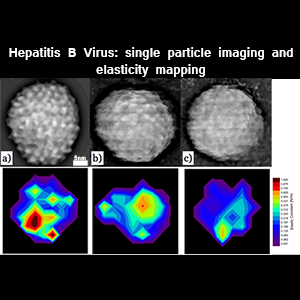
<style>
.page{position:relative;width:300px;height:300px;background:#000000}
.page>*{position:absolute;margin:0}
.t1{font:14px "Latha-Bold";color:#ffffff}
.t2{font:6.5px "Latha-Bold";color:#ffffff}
</style>
<div class="page">
<p class="t1" style="left:9px;top:47px;width:284px;height:30px;text-align:center">Hepatitis B Virus: single particle imaging and<br>elasticity mapping</p>
<p class="t2" style="left:74px;top:155px;width:12px;height:6px">5nm</p>
</div>
